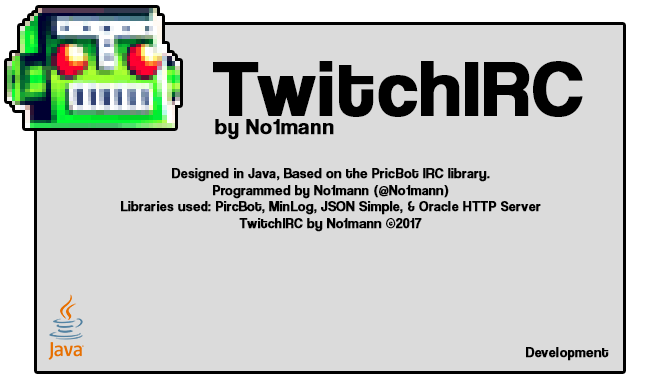
<style>
.page{position:relative;width:650px;height:381px;background:#dbdbdb}
.page>*{position:absolute;margin:0}
.t1{font:80px "CoolveticaRg-Regular";letter-spacing:0.025em;color:#000000;font-weight:bold}
.t2{font:22px "CoolveticaRg-Regular";letter-spacing:0.025em;color:#000000;font-weight:bold}
.t3{font:13.7px "CoolveticaRg-Regular";letter-spacing:0.025em;color:#000000;font-weight:bold}
</style>
<div class="page">
<p class="t1" style="left:213px;top:61px;width:370px;height:56px">TwitchIRC</p>
<p class="t2" style="left:215px;top:119px;width:119px;height:21px">by No1mann</p>
<p class="t3" style="left:121px;top:168px;width:420px;height:64px;text-align:center">Designed in Java, Based on the PricBot IRC library.<br>Programmed by No1mann (@No1mann)<br>Libraries used: PircBot, MinLog, JSON Simple, &amp; Oracle HTTP Server<br>TwitchIRC by No1mann ©2017</p>
<p class="t3" style="left:526px;top:347px;width:83px;height:14px">Development</p>
</div>
